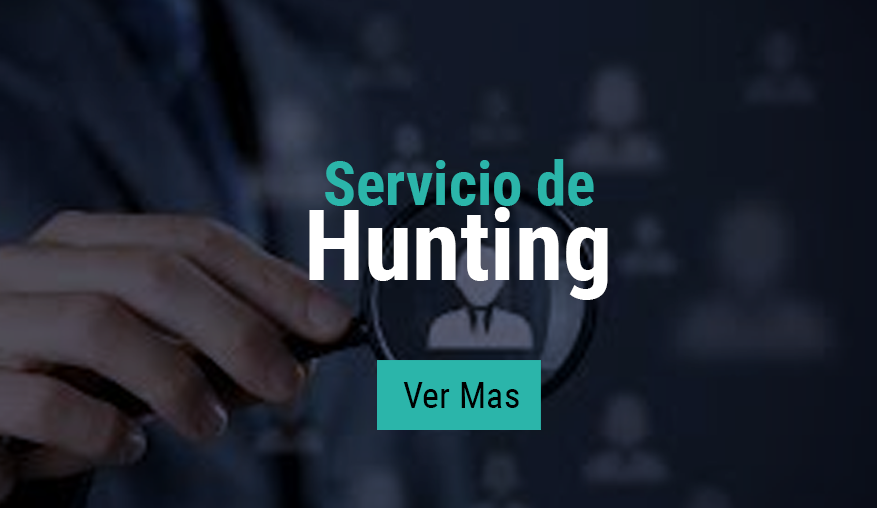
<style>
.page{position:relative;width:877px;height:508px}
.page>*{position:absolute;margin:0}
.t1{font:60.9px "RobotoCondensed-Bold";color:#2bb5aa}
.t2{font:97.6px "RobotoCondensed-Bold";color:#ffffff}
.t3{font:36.4px "RobotoCondensed-Regular";color:#000000}
</style>
<div class="page">
<p class="t1" style="left:325px;top:159px;width:269px;height:47px">Servicio de</p>
<p class="t2" style="left:309px;top:207px;width:299px;height:93px">Hunting</p>
<p class="t3" style="left:403px;top:382px;width:116px;height:26px">Ver Mas</p>
</div>
